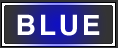
<style>
.page{position:relative;width:118px;height:48px}
.page>*{position:absolute;margin:0}
.t1{font:28px "Helvetica-Bold";letter-spacing:0.1em;color:#ffffff}
</style>
<div class="page">
<p class="t1" style="left:17px;top:14px;width:83px;height:22px">BLUE</p>
</div>
